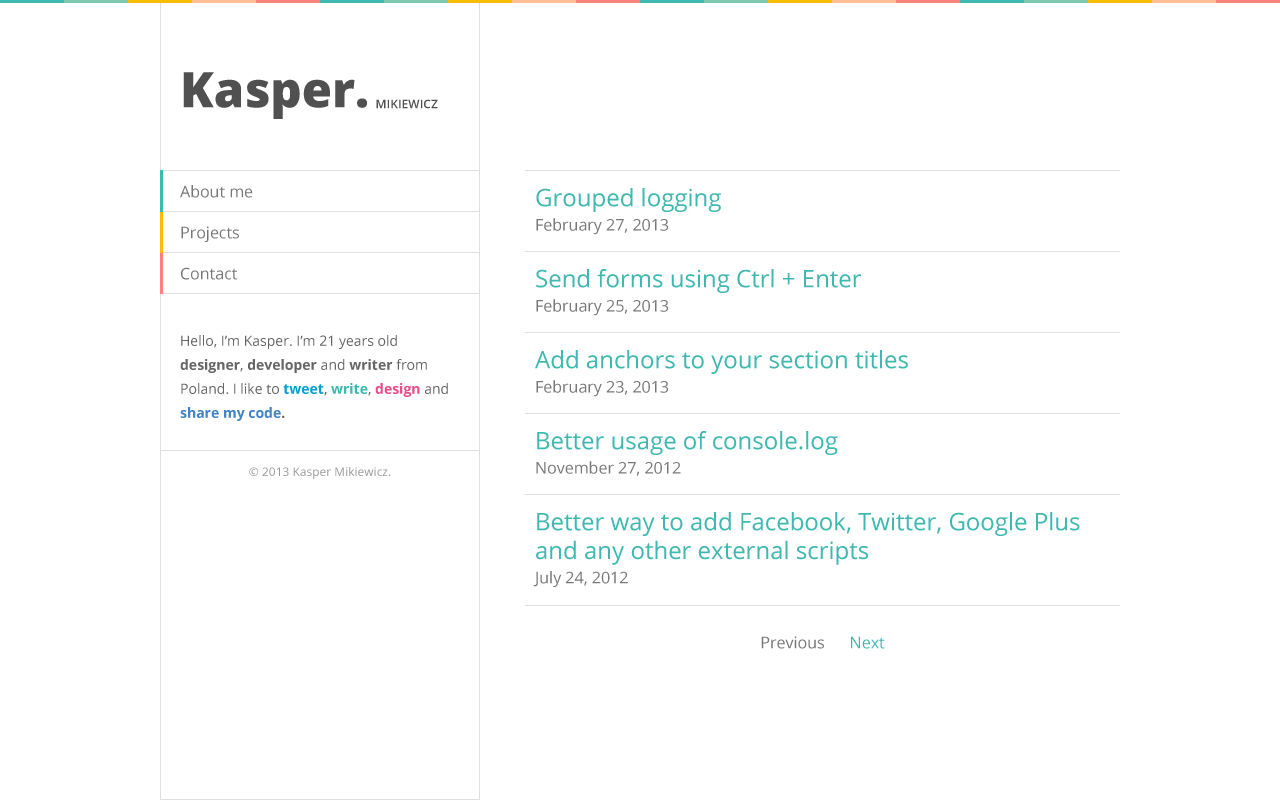
<style>
.page{position:relative;width:1280px;height:800px;background:#ffffff}
.page>*{position:absolute;margin:0}
.t1{font:12px "OpenSans-Semibold";color:#505050;text-transform:uppercase}
.t2{font:49px "OpenSans-Extrabold";color:#505050}
.t3{font:16px "OpenSans";color:#777777}
.t4{font:24px "OpenSans";color:#3fb8af}
.t5{font:14px/24px "OpenSans";color:#666666}
.t6{font:14px/24px "OpenSans-Bold";color:#666666}
.t7{font:14px/24px "OpenSans-Bold";color:#00a0d1}
.t8{font:14px/24px "OpenSans-Bold";color:#3fb8af}
.t9{font:14px/24px "OpenSans-Bold";color:#ea4c89}
.t10{font:14px/24px "OpenSans-Bold";color:#4183c4}
.t11{font:12px "OpenSans";color:#999999}
.t12{font:16px "OpenSans";color:#3fb8af}
</style>
<div class="page">
<p class="t1" style="left:183px;top:72px;width:255px;height:47px"><span class="t2">Kasper. </span>Mikiewicz</p>
<p class="t3" style="left:180px;top:185px;width:73px;height:13px">About me</p>
<p class="t3" style="left:536px;top:188px;width:185px;height:47px"><span class="t4">Grouped logging<br></span>February 27, 2013</p>
<p class="t3" style="left:181px;top:226px;width:58px;height:16px">Projects</p>
<p class="t3" style="left:181px;top:267px;width:57px;height:13px">Contact</p>
<p class="t4" style="left:536px;top:269px;width:325px;height:47px">Send forms using Ctrl + Enter<br><span class="t3">February 25, 2013</span></p>
<p class="t5" style="left:180px;top:335px;width:268px;height:86px">Hello, I’m Kasper. I’m 21 years old <span class="t6">designer</span>, <span class="t6">developer </span>and <span class="t6">writer </span>from Poland. I like to <span class="t7">tweet</span>, <span class="t8">write</span>, <span class="t9">design </span>and <span class="t10">share my code</span><span class="t6">.</span></p>
<p class="t4" style="left:535px;top:350px;width:373px;height:47px">Add anchors to your section titles<br><span class="t3">February 23, 2013</span></p>
<p class="t4" style="left:536px;top:431px;width:302px;height:45px">Better usage of console.log<br><span class="t3">November 27, 2012</span></p>
<p class="t11" style="left:249px;top:467px;width:142px;height:12px">© 2013 Kasper Mikiewicz.</p>
<p class="t4" style="left:533px;top:512px;width:547px;height:75px">Better way to add Facebook, Twitter, Google Plus and any other external scripts<br><span class="t3">July 24, 2012</span></p>
<p class="t3" style="left:761px;top:636px;width:124px;height:13px">Previous      <span class="t12">Next</span></p>
</div>
